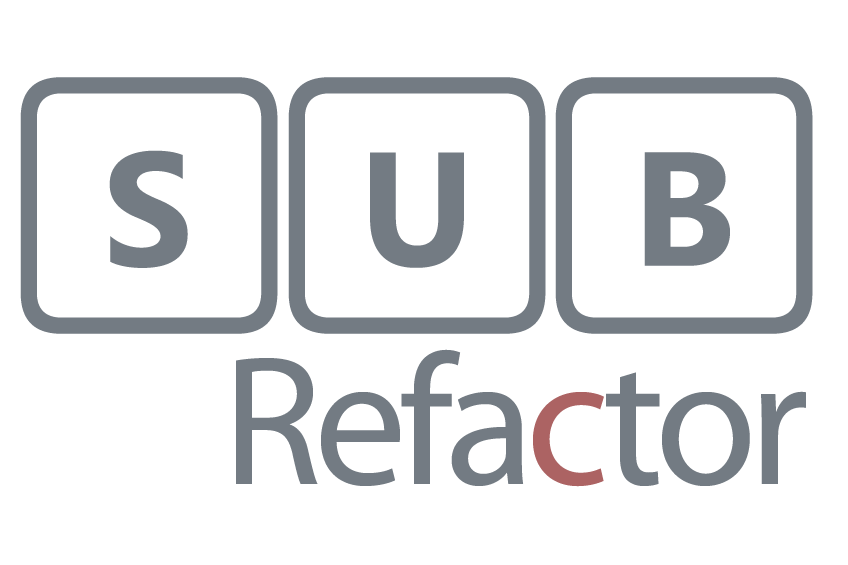
<style>
.page{position:relative;width:848px;height:565px;background:#ffffff}
.page>*{position:absolute;margin:0}
.t1{font:220.8px "SegoeKeycaps";letter-spacing:-0.045em;color:#737b83}
.t2{font:185.3px "MyriadPro-Regular";letter-spacing:-0.045em;color:#737b83}
.t3{font:185.3px "MyriadPro-Regular";letter-spacing:-0.045em;color:#ac6363}
</style>
<div class="page">
<p class="t1" style="left:20px;top:77px;width:793px;height:257px">SUB</p>
<p class="t2" style="left:236px;top:349px;width:570px;height:138px">Refa<span class="t3">c</span>tor</p>
</div>
